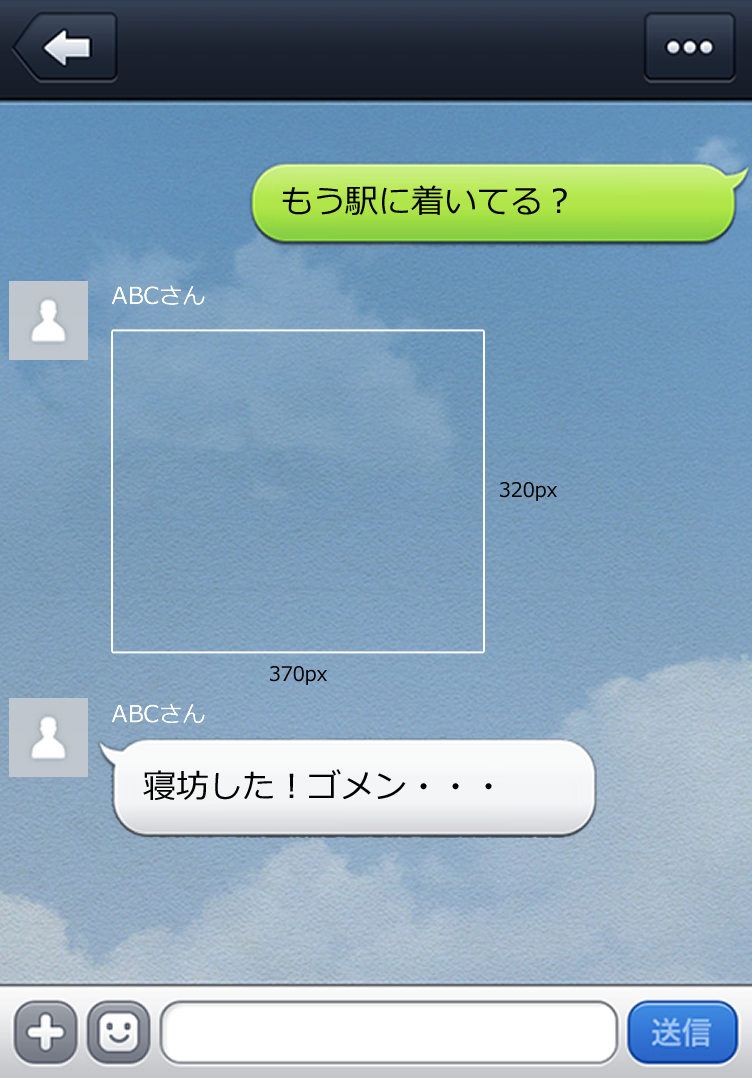
<style>
.page{position:relative;width:752px;height:1078px}
.page>*{position:absolute;margin:0}
.t1{font:32.9px "Meiryo";color:#000000}
.t2{font:20px "Meiryo";color:#000000}
</style>
<div class="page">
<p class="t1" style="left:282px;top:185px;width:285px;height:30px">もう駅に着いてる？</p>
<p class="t2" style="left:500px;top:482px;width:57px;height:19px">320px</p>
<p class="t2" style="left:270px;top:666px;width:57px;height:19px">370px</p>
<p class="t1" style="left:143px;top:769px;width:349px;height:31px">寝坊した！ゴメン・・・</p>
</div>
